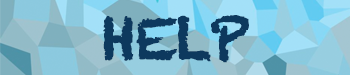
<style>
.page{position:relative;width:350px;height:75px}
.page>*{position:absolute;margin:0}
.t1{font:55.9px "Chalkduster";letter-spacing:-0.05em;color:#0d395e;font-weight:bold}
</style>
<div class="page">
<p class="t1" style="left:103px;top:15px;width:146px;height:48px">HELP</p>
</div>
